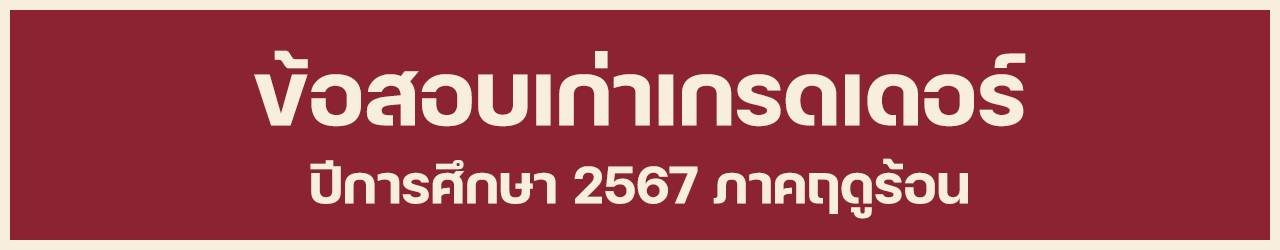
<style>
.page{position:relative;width:1280px;height:250px;background:#8b2332}
.page>*{position:absolute;margin:0}
.t1{font:120px "FCMinimalBold";color:#f8eedf}
.t2{font:72px "FCMinimalBold";color:#f8eedf}
</style>
<div class="page">
<p class="t1" style="left:254px;top:50px;width:772px;height:77px">ข้อสอบเก่าเกรดเดอร์</p>
<p class="t2" style="left:310px;top:158px;width:658px;height:61px">ปีการศึกษา 2567 ภาคฤดูร้อน</p>
</div>
